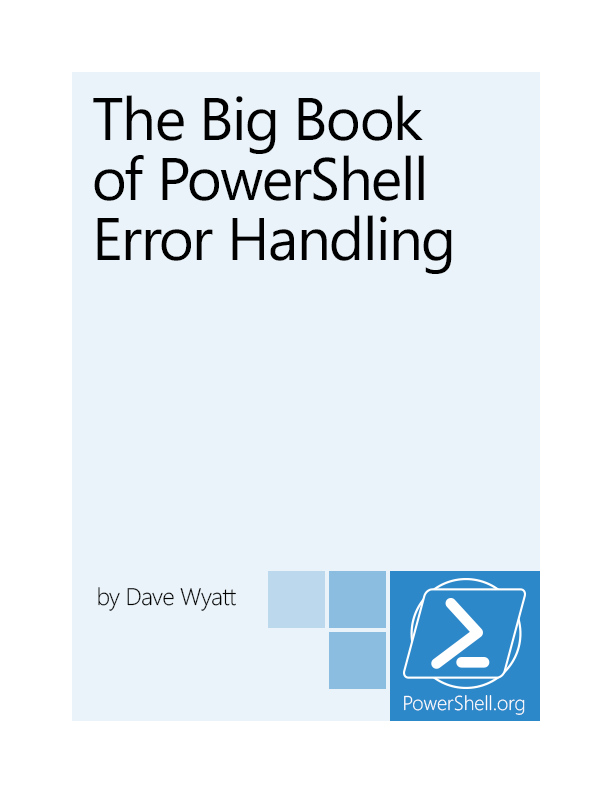
<style>
.page{position:relative;width:612px;height:792px;background:#eaf3f9}
.page>*{position:absolute;margin:0}
.t1{font:60px/60px "Segoe";letter-spacing:-0.025em;color:#000000}
.t2{font:24px "Segoe-Light";letter-spacing:-0.025em;color:#000000}
</style>
<div class="page">
<p class="t1" style="left:93px;top:95px;width:359px;height:179px">The Big Book<br>of PowerShell<br>Error Handling</p>
<p class="t2" style="left:98px;top:587px;width:138px;height:24px">by Dave Wyatt</p>
</div>
